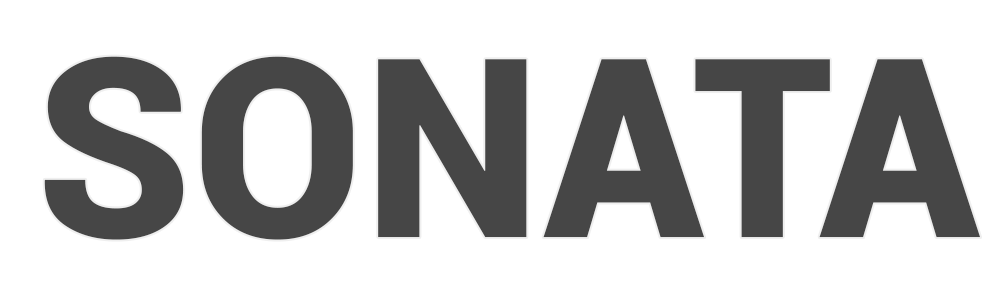
<style>
.page{position:relative;width:1000px;height:296px;background:#ffffff}
.page>*{position:absolute;margin:0}
.t1{font:250px "Roboto-Black";color:#464646}
</style>
<div class="page">
<p class="t1" style="left:44px;top:56px;width:937px;height:184px">SONATA</p>
</div>
